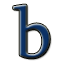
<style>
.page{position:relative;width:64px;height:64px;background:#ffffff}
.page>*{position:absolute;margin:0}
.t1{font:73.5px "Sylfaen";font-weight:bold}
</style>
<div class="page">
<p class="t1" style="left:13px;top:4px;width:37px;height:55px">b</p>
</div>
